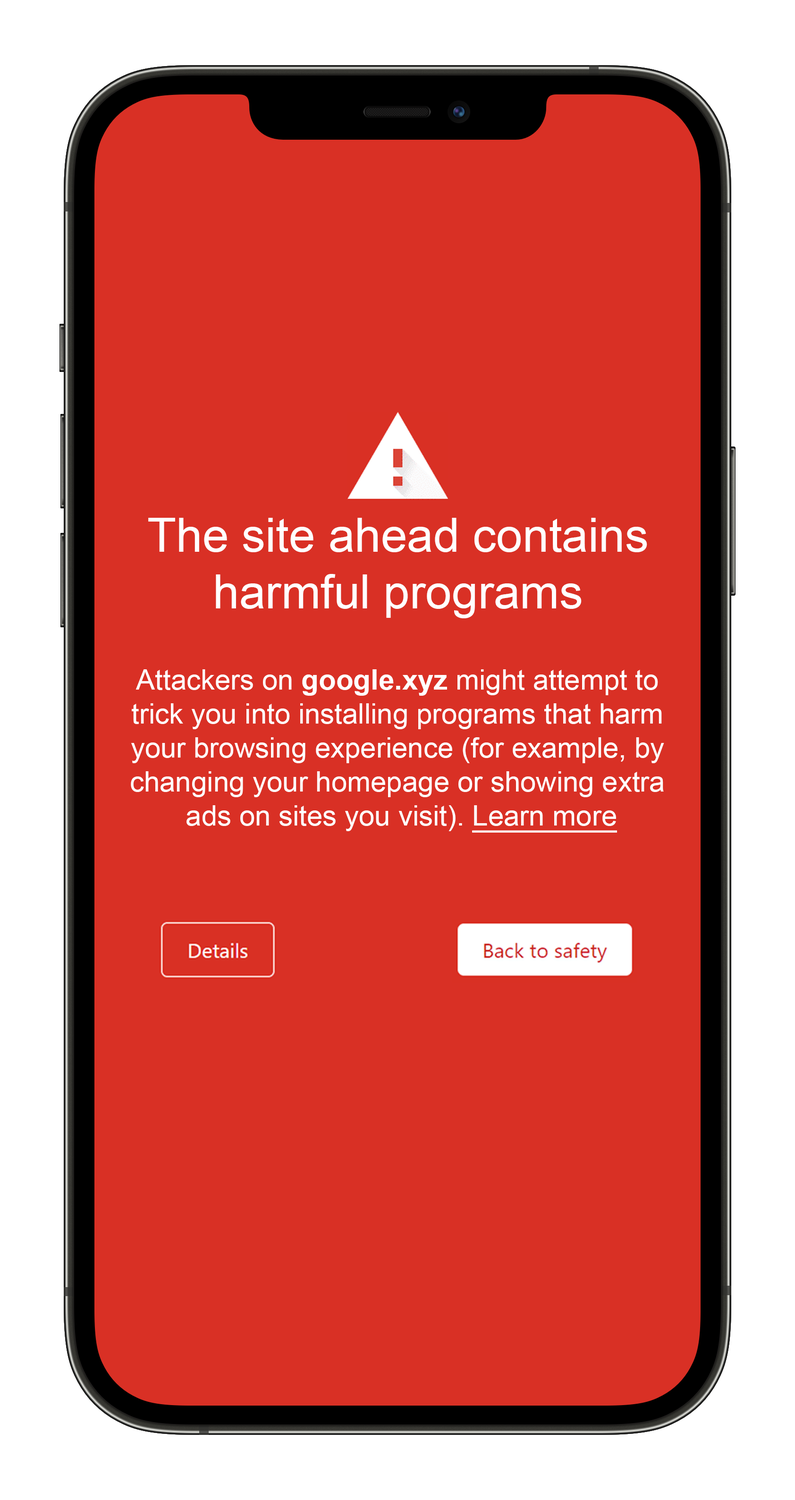
<style>
.page{position:relative;width:795px;height:1500px;background:#d93025}
.page>*{position:absolute;margin:0}
.t1{font:47.2px "ArialMT";color:#ffffff}
.t2{font:28.3px "ArialMT";color:#ffffff}
.t3{font:28.3px "Arial-BoldMT";color:#ffffff}
.t4{font:28.3px "ArialMT";color:#ffffff;text-decoration:underline}
</style>
<div class="page">
<p class="t1" style="left:148px;top:518px;width:499px;height:100px;text-align:center">The site ahead contains<br>harmful programs</p>
<p class="t2" style="left:131px;top:669px;width:533px;height:164px;text-align:center">Attackers on <span class="t3">google.xyz </span>might attempt to <br>trick you into installing programs that harm <br>your browsing experience (for example, by <br>changing your homepage or showing extra <br>ads on sites you visit). <span class="t4">Learn more</span></p>
</div>
